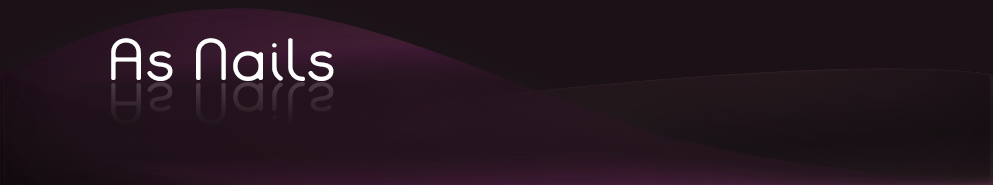
<style>
.page{position:relative;width:993px;height:185px;background:#1b1117}
.page>*{position:absolute;margin:0}
.t1{font:51.6px "Lachata";letter-spacing:-0.005em;color:#ffffff;scale:1.04 1}
</style>
<div class="page">
<p class="t1" style="left:111px;top:38px;width:223px;height:43px">As Nails</p>
</div>
